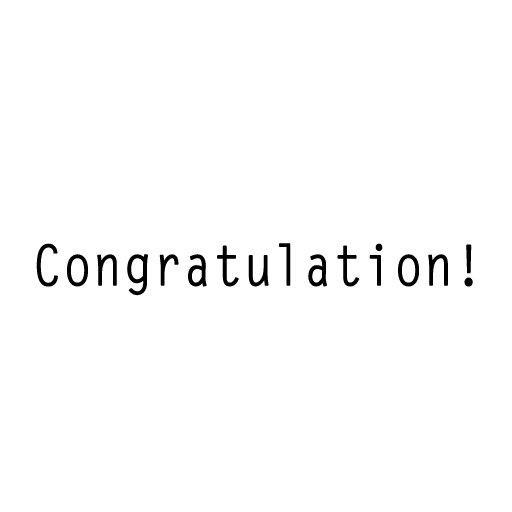
<style>
.page{position:relative;width:512px;height:512px;background:#ffffff}
.page>*{position:absolute;margin:0}
.t1{font:55.2px "LetterGothicStd";color:#000000;font-weight:bold;scale:0.87 1}
</style>
<div class="page">
<p class="t1" style="left:36px;top:243px;width:437px;height:53px">Congratulation!</p>
</div>
